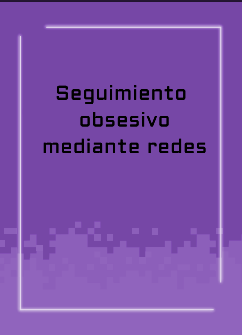
<style>
.page{position:relative;width:242px;height:335px;background:#7647a6}
.page>*{position:absolute;margin:0}
.t1{font:20px/26.7px "Aldrich-Regular";letter-spacing:0.025em;color:#000000}
</style>
<div class="page">
<p class="t1" style="left:43px;top:85px;width:163px;height:69px;text-align:center">Seguimiento <br>obsesivo<br>mediante redes</p>
</div>
